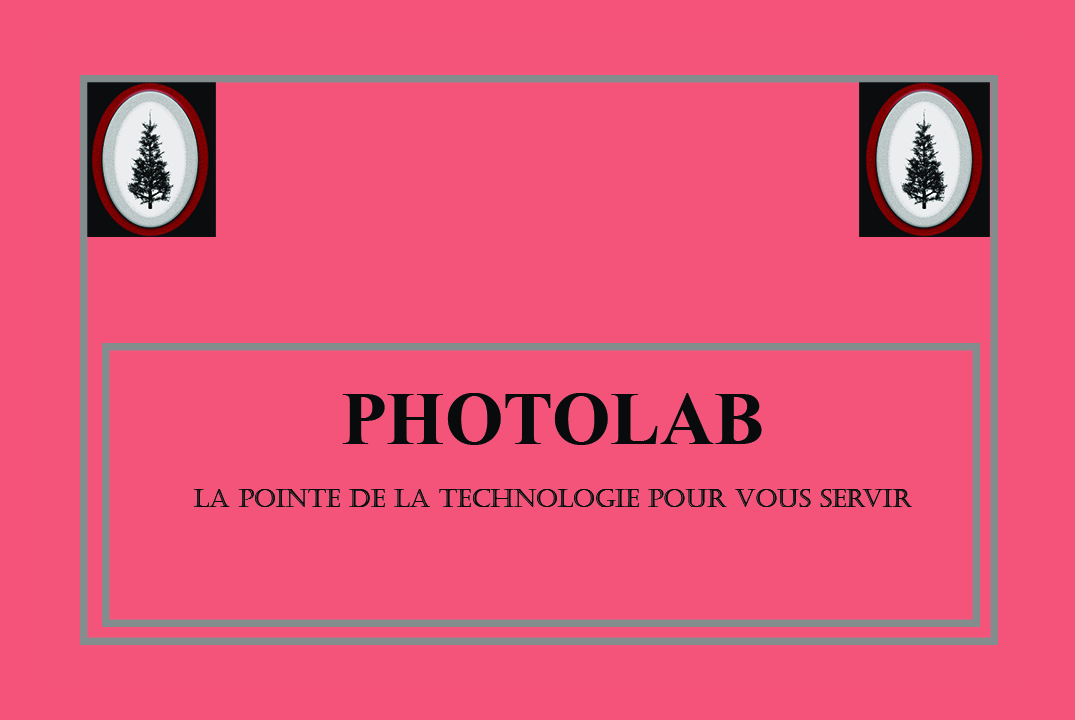
<style>
.page{position:relative;width:1075px;height:720px;background:#f5547a}
.page>*{position:absolute;margin:0}
.t1{font:75px "TimesNewRomanPS-BoldMT";color:#080a0b}
.t2{font:25px "Castellar";color:#080b0b}
</style>
<div class="page">
<p class="t1" style="left:342px;top:393px;width:420px;height:52px">PHOTOLAB</p>
<p class="t2" style="left:193px;top:489px;width:719px;height:18px">La pointe de la technologie pour vous servir</p>
</div>
